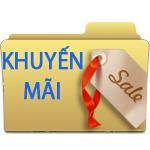
<style>
.page{position:relative;width:150px;height:150px;background:#ffffff}
.page>*{position:absolute;margin:0}
.t1{font:25px "MyriadPro-Regular";color:#2167dc;font-weight:bold;scale:0.9 1}
</style>
<div class="page">
<p class="t1" style="left:2px;top:46px;width:81px;height:54px">KHUYẾN<br>    MÃI</p>
</div>
